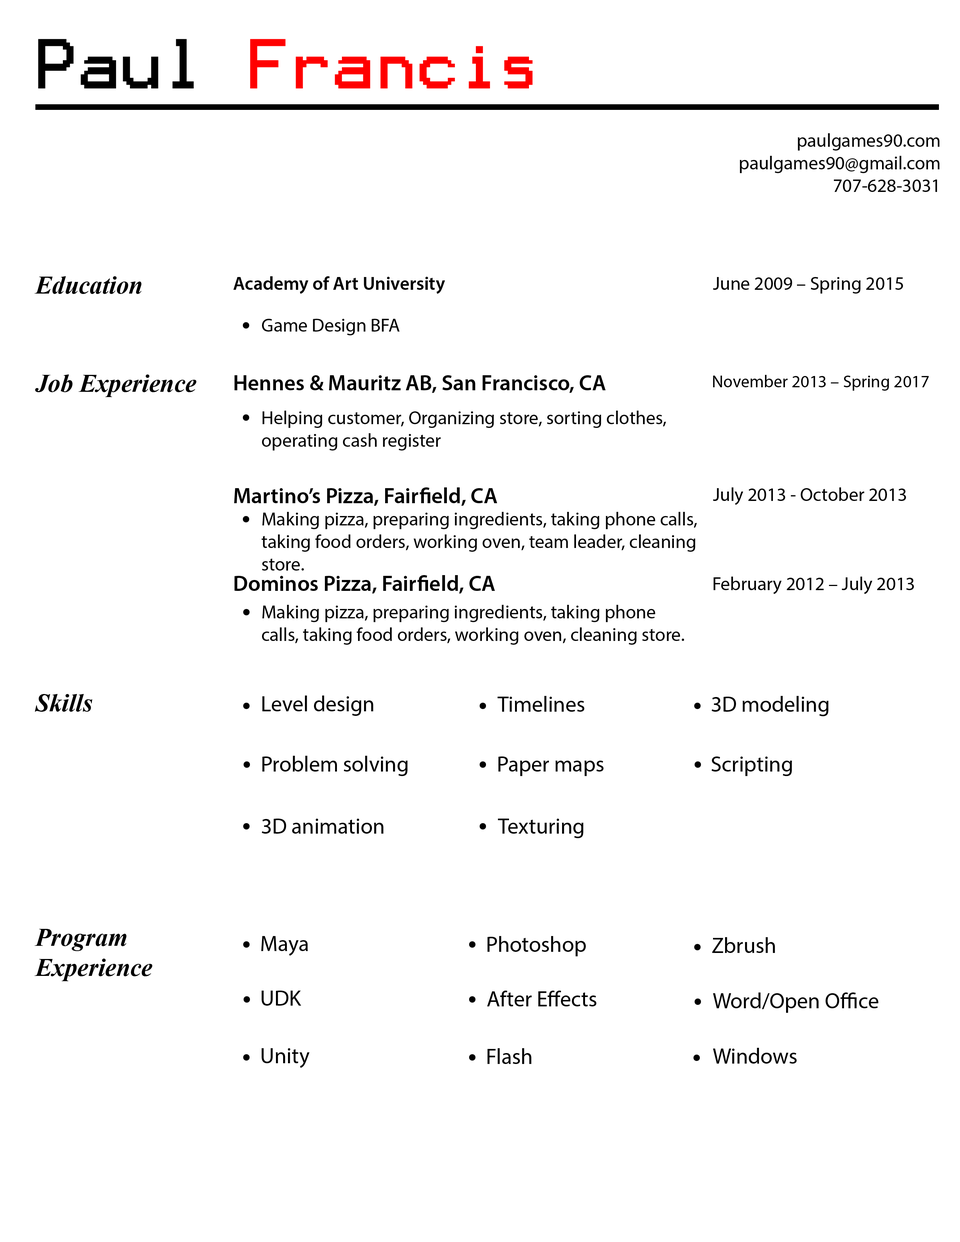
<style>
.page{position:relative;width:960px;height:1242px;background:#ffffff}
.page>*{position:absolute;margin:0}
.t1{font:56.5px "Terminal";color:#ff0000}
.t2{font:56.5px "Terminal";color:#000000}
.t3{font:18.8px "MyriadPro-Regular";color:#000000}
.t4{font:25.1px "TimesNewRomanPS-BoldItalicMT";color:#000000}
.t5{font:18.8px "MyriadPro-Semibold";color:#000000}
.t6{font:4.5px "MyriadPro-Regular";color:#000000}
.t7{font:22px "MyriadPro-Semibold";color:#000000}
.t8{font:17.3px "MyriadPro-Regular";color:#000000}
.t9{font:22px "MyriadPro-Regular";color:#000000}
</style>
<div class="page">
<p class="t1" style="left:38px;top:39px;width:495px;height:49px"><span class="t2">Paul </span>Francis</p>
<p class="t3" style="left:740px;top:133px;width:200px;height:59px;text-align:right">paulgames90.com<br> paulgames90@gmail.com<br>707-628-3031</p>
<p class="t4" style="left:34px;top:276px;width:108px;height:18px">Education</p>
<p class="t5" style="left:233px;top:276px;width:212px;height:18px">Academy of Art University</p>
<p class="t3" style="left:713px;top:277px;width:190px;height:17px">June 2009 – Spring 2015</p>
<p class="t6" style="left:262px;top:319px;width:138px;height:16px">Game Design BFA</p>
<p class="t4" style="left:35px;top:375px;width:161px;height:22px">Job Experience</p>
<p class="t7" style="left:235px;top:375px;width:371px;height:18px">Hennes &amp; Mauritz AB, San Francisco, CA</p>
<p class="t8" style="left:713px;top:375px;width:216px;height:16px">November 2013 – Spring 2017</p>
<p class="t6" style="left:262px;top:411px;width:404px;height:40px">Helping customer, Organizing store, sorting clothes, operating cash register</p>
<p class="t7" style="left:234px;top:487px;width:263px;height:19px">Martino’s Pizza, Fairfield, CA</p>
<p class="t6" style="left:713px;top:487px;width:193px;height:18px">July 2013 - October 2013</p>
<p class="t6" style="left:262px;top:512px;width:435px;height:59px">Making pizza, preparing ingredients, taking phone calls, taking food orders, working oven, team leader, cleaning store.</p>
<p class="t7" style="left:235px;top:575px;width:260px;height:19px">Dominos Pizza, Fairfield, CA</p>
<p class="t6" style="left:713px;top:577px;width:201px;height:17px">February 2012 – July 2013</p>
<p class="t6" style="left:262px;top:605px;width:422px;height:40px">Making pizza, preparing ingredients, taking phone calls, taking food orders, working oven, cleaning store.</p>
<p class="t4" style="left:35px;top:694px;width:57px;height:18px">Skills</p>
<p class="t9" style="left:262px;top:696px;width:111px;height:20px">Level design</p>
<p class="t9" style="left:497px;top:696px;width:87px;height:16px">Timelines</p>
<p class="t9" style="left:711px;top:696px;width:118px;height:20px">3D modeling</p>
<p class="t9" style="left:262px;top:756px;width:146px;height:20px">Problem solving</p>
<p class="t9" style="left:498px;top:757px;width:105px;height:19px">Paper maps</p>
<p class="t9" style="left:711px;top:757px;width:81px;height:19px">Scripting</p>
<p class="t9" style="left:262px;top:819px;width:122px;height:15px">3D animation</p>
<p class="t9" style="left:498px;top:819px;width:85px;height:19px">Texturing</p>
<p class="t4" style="left:34px;top:929px;width:118px;height:52px">Program<br>Experience</p>
<p class="t9" style="left:261px;top:936px;width:47px;height:20px">Maya</p>
<p class="t9" style="left:487px;top:936px;width:99px;height:21px">Photoshop</p>
<p class="t9" style="left:712px;top:937px;width:63px;height:16px">Zbrush</p>
<p class="t9" style="left:262px;top:991px;width:39px;height:15px">UDK</p>
<p class="t9" style="left:487px;top:991px;width:109px;height:16px">After Effects</p>
<p class="t9" style="left:713px;top:993px;width:165px;height:20px">Word/Open Office</p>
<p class="t9" style="left:262px;top:1048px;width:47px;height:20px">Unity</p>
<p class="t9" style="left:487px;top:1048px;width:45px;height:16px">Flash</p>
<p class="t9" style="left:713px;top:1048px;width:84px;height:16px">Windows</p>
</div>
